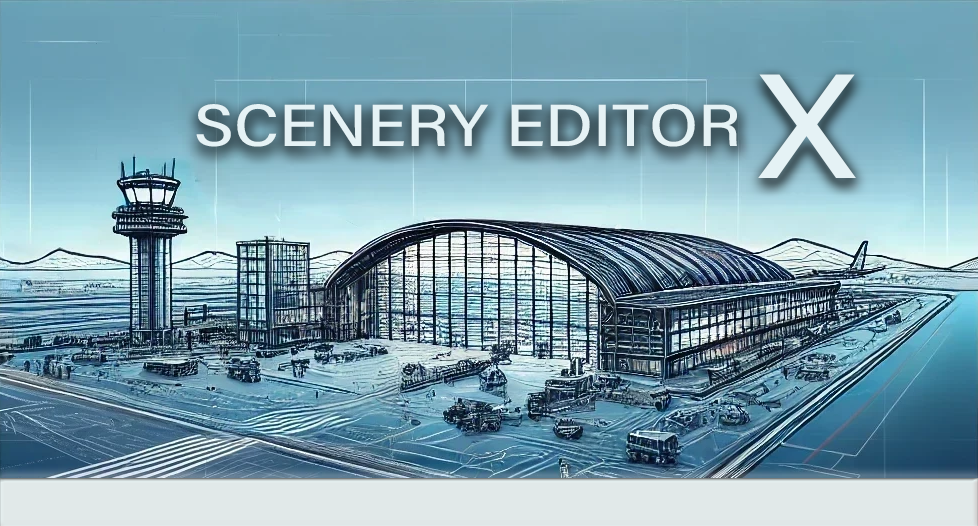
<style>
.page{position:relative;width:978px;height:526px}
.page>*{position:absolute;margin:0}
.t1{font:60px "AcuminConcept-SemiCondensedMedium";color:#e5f2f5;scale:1.2 1}
.t2{font:150px "AcuminConcept-SemiCondensedMedium";color:#e5f2f5;scale:1.2 1}
</style>
<div class="page">
<p class="t1" style="left:196px;top:74px;width:660px;height:104px">SCENERY EDITOR <span class="t2">X</span></p>
</div>
